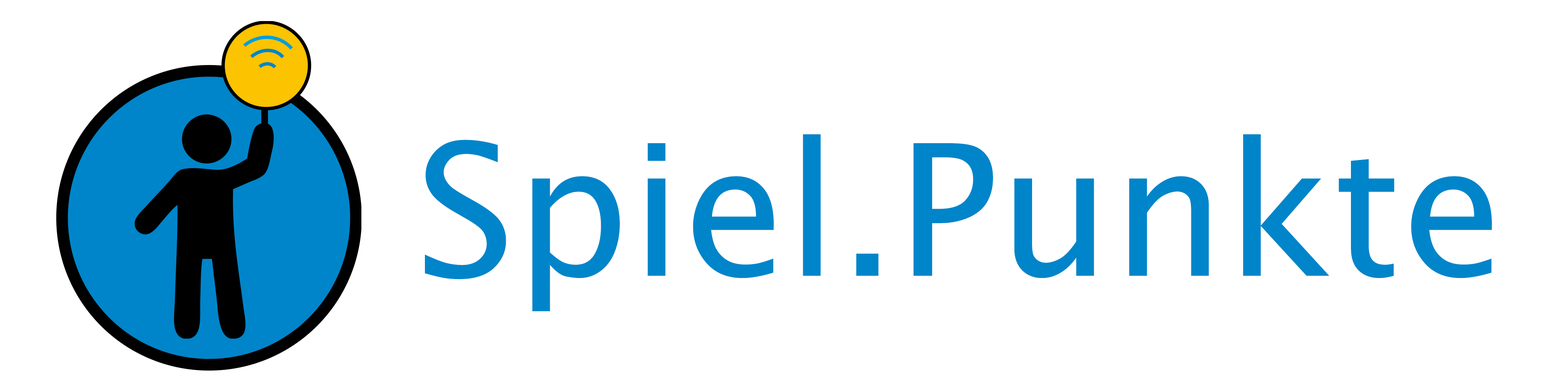
<style>
.page{position:relative;width:1568px;height:392px;background:#ffffff}
.page>*{position:absolute;margin:0}
.t1{font:183.4px "LucidaSans";color:#0085ca}
</style>
<div class="page">
<p class="t1" style="left:425px;top:134px;width:1067px;height:177px">Spiel.Punkte</p>
</div>
